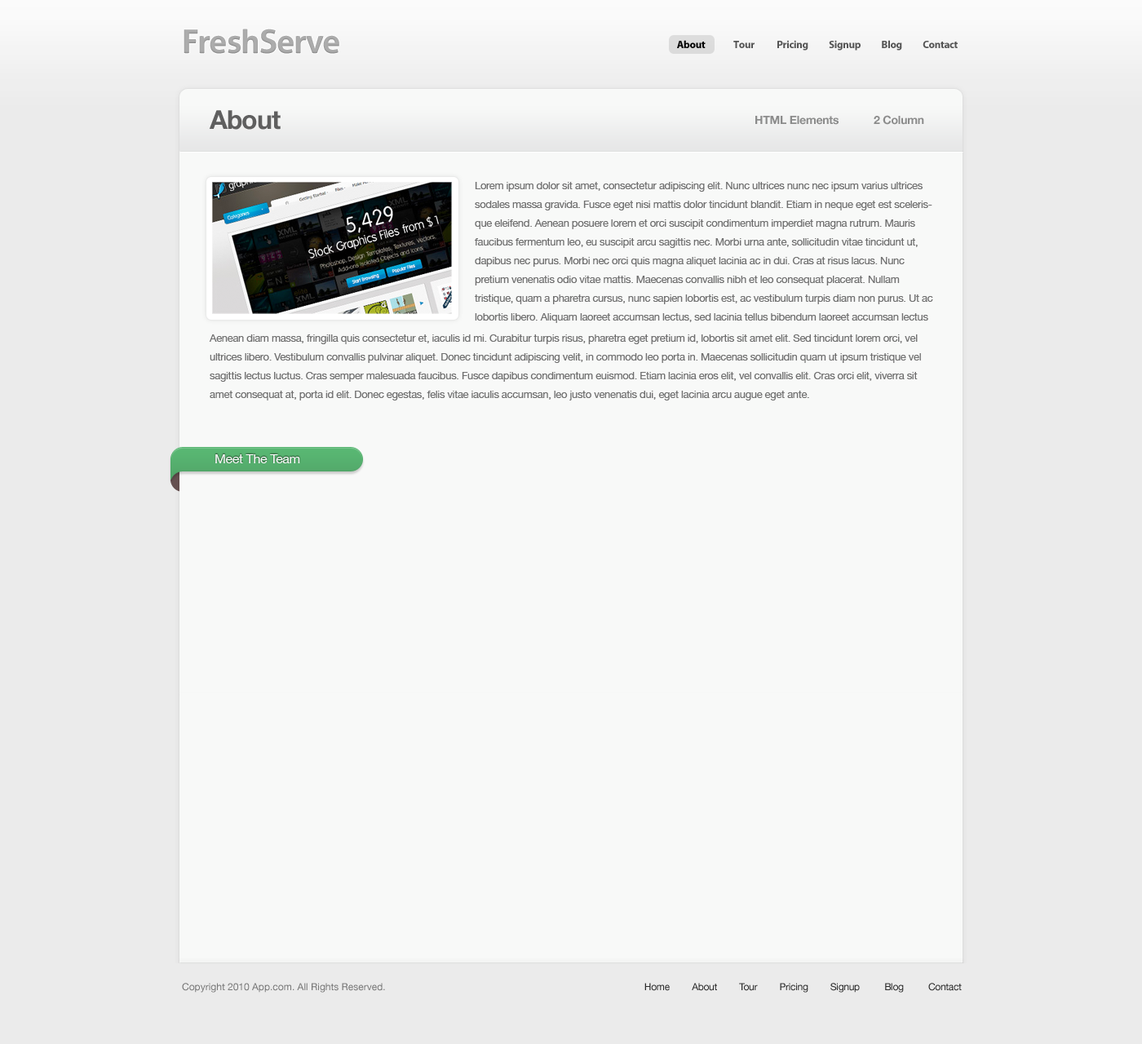
<style>
.page{position:relative;width:1142px;height:1044px;background:#f8f9f8}
.page>*{position:absolute;margin:0}
.t1{font:32.6px "Aller-Bold";letter-spacing:-0.025em;color:#acacac}
.t2{font:10.6px "MyriadPro-Bold";letter-spacing:-0.025em;color:#555555}
.t3{font:10.6px "MyriadPro-Bold";letter-spacing:-0.025em;color:#000000}
.t4{font:26.1px "HelveticaNeue-Bold";letter-spacing:-0.025em;color:#5e5e5e}
.t5{font:11.4px "HelveticaNeue-Bold";letter-spacing:-0.015em;color:#8b8b8b}
.t6{font:10.6px/18.8px "HelveticaNeue";letter-spacing:-0.025em;color:#707070}
.t7{font:13.1px "HelveticaNeue";letter-spacing:-0.025em;color:#ffffff}
.t8{font:9.8px "HelveticaNeue";color:#757575}
.t9{font:9.8px "HelveticaNeue";letter-spacing:-0.025em;color:#2a2a2a}
</style>
<div class="page">
<p class="t1" style="left:184px;top:29px;width:155px;height:25px">FreshServe</p>
<p class="t2" style="left:677px;top:40px;width:281px;height:11px"><span class="t3">About               </span>Tour            Pricing           Signup           Blog           Contact</p>
<p class="t4" style="left:209px;top:110px;width:72px;height:20px">About</p>
<p class="t5" style="left:755px;top:116px;width:84px;height:9px">HTML Elements</p>
<p class="t5" style="left:874px;top:115px;width:50px;height:10px">2 Column</p>
<p class="t6" style="left:475px;top:182px;width:458px;height:141px">Lorem ipsum dolor sit amet, consectetur adipiscing elit. Nunc ultrices nunc nec ipsum varius ultrices sodales massa gravida. Fusce eget nisi mattis dolor tincidunt blandit. Etiam in neque eget est scelerisque eleifend. Aenean posuere lorem et orci suscipit condimentum imperdiet magna rutrum. Mauris faucibus fermentum leo, eu suscipit arcu sagittis nec. Morbi urna ante, sollicitudin vitae tincidunt ut, dapibus nec purus. Morbi nec orci quis magna aliquet lacinia ac in dui. Cras at risus lacus. Nunc pretium venenatis odio vitae mattis. Maecenas convallis nibh et leo consequat placerat. Nullam tristique, quam a pharetra cursus, nunc sapien lobortis est, ac vestibulum turpis diam non purus. Ut ac lobortis libero. Aliquam laoreet accumsan lectus, sed lacinia tellus bibendum laoreet accumsan lectus</p>
<p class="t6" style="left:209px;top:334px;width:712px;height:67px">Aenean diam massa, fringilla quis consectetur et, iaculis id mi. Curabitur turpis risus, pharetra eget pretium id, lobortis sit amet elit. Sed tincidunt lorem orci, vel ultrices libero. Vestibulum convallis pulvinar aliquet. Donec tincidunt adipiscing velit, in commodo leo porta in. Maecenas sollicitudin quam ut ipsum tristique vel sagittis lectus luctus. Cras semper malesuada faucibus. Fusce dapibus condimentum euismod. Etiam lacinia eros elit, vel convallis elit. Cras orci elit, viverra sit amet consequat at, porta id elit. Donec egestas, felis vitae iaculis accumsan, leo justo venenatis dui, eget lacinia arcu augue eget ante.</p>
<p class="t7" style="left:215px;top:454px;width:85px;height:9px">Meet The Team</p>
<p class="t8" style="left:182px;top:983px;width:203px;height:10px">Copyright 2010 App.com. All Rights Reserved.</p>
<p class="t9" style="left:644px;top:983px;width:318px;height:10px">Home         About         Tour         Pricing         Signup          Blog          Contact</p>
</div>
